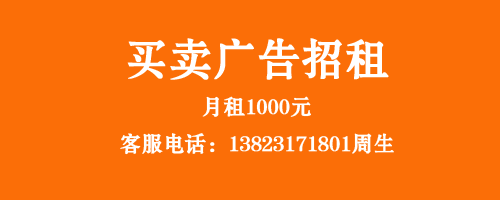
<style>
.page{position:relative;width:500px;height:200px;background:#fb6e07}
.page>*{position:absolute;margin:0}
.t1{font:42.9px "FZSHJW--GB1-0";color:#ffffff;font-weight:bold}
.t2{font:21.3px "FZSHJW--GB1-0";color:#ffffff;font-weight:bold}
</style>
<div class="page">
<p class="t1" style="left:127px;top:38px;width:262px;height:42px">买卖广告招租</p>
<p class="t2" style="left:202px;top:96px;width:109px;height:21px">月租1000元</p>
<p class="t2" style="left:120px;top:133px;width:274px;height:22px">客服电话：13823171801周生</p>
</div>
